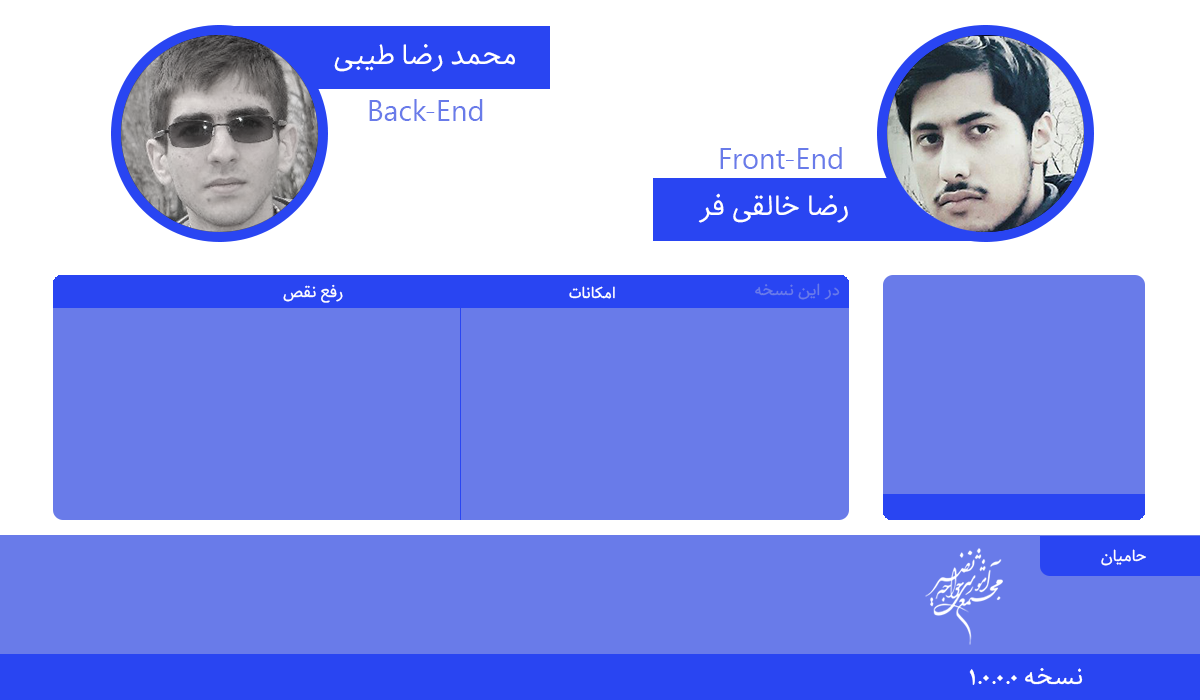
<style>
.page{position:relative;width:1200px;height:700px;background:#697be9}
.page>*{position:absolute;margin:0}
.t1{font:29.2px "Behdad-Regular";color:#ffffff}
.t2{font:16.7px "Behdad-Regular";color:#ffffff}
.t3{font:16.7px "Behdad-Regular";color:#697be9}
.t4{font:25px "NazaninBold";color:#ffffff}
.t5{font:25px "Behdad-Regular";color:#ffffff}
</style>
<div class="page">
<p class="t1" style="left:334px;top:44px;width:181px;height:28px">محمد رضا طیبی</p>
<p class="t1" style="left:698px;top:193px;width:150px;height:30px">رضا خالقی فر</p>
<p class="t2" style="left:283px;top:284px;width:60px;height:19px">رفع نقص</p>
<p class="t2" style="left:569px;top:286px;width:46px;height:13px">امکانات</p>
<p class="t3" style="left:755px;top:283px;width:85px;height:17px">در این نسخه</p>
<p class="t2" style="left:1101px;top:549px;width:45px;height:17px">حامیان</p>
<p class="t4" style="left:969px;top:668px;width:114px;height:17px"><span class="t5">نسخه </span>1.0.0.0</p>
</div>
